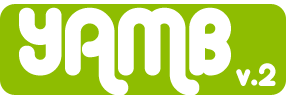
<style>
.page{position:relative;width:290px;height:100px;background:#ffffff}
.page>*{position:absolute;margin:0}
.t1{font:90px "AlbaMatter";letter-spacing:0.025em;color:#ffffff}
.t2{font:30px "AlbaMatter";letter-spacing:0.05em;color:#ffffff}
</style>
<div class="page">
<p class="t1" style="left:19px;top:7px;width:212px;height:89px">YAMB</p>
<p class="t2" style="left:236px;top:63px;width:40px;height:23px">v.2</p>
</div>
